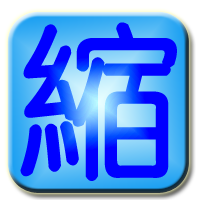
<style>
.page{position:relative;width:200px;height:200px}
.page>*{position:absolute;margin:0}
.t1{font:163.4px "YouYuan";letter-spacing:0.05em;font-weight:bold}
</style>
<div class="page">
<p class="t1" style="left:20px;top:22px;width:157px;height:159px">縮</p>
</div>
